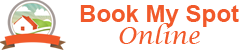
<style>
.page{position:relative;width:250px;height:50px;background:#ffffff}
.page>*{position:absolute;margin:0}
.t1{font:24px "Arial-BoldMT";color:#f1592a}
.t2{font:24px "LucidaCalligraphy-Italic";color:#f1592a}
</style>
<div class="page">
<p class="t1" style="left:80px;top:5px;width:159px;height:22px">Book My Spot</p>
<p class="t2" style="left:119px;top:23px;width:81px;height:21px">Online</p>
</div>
